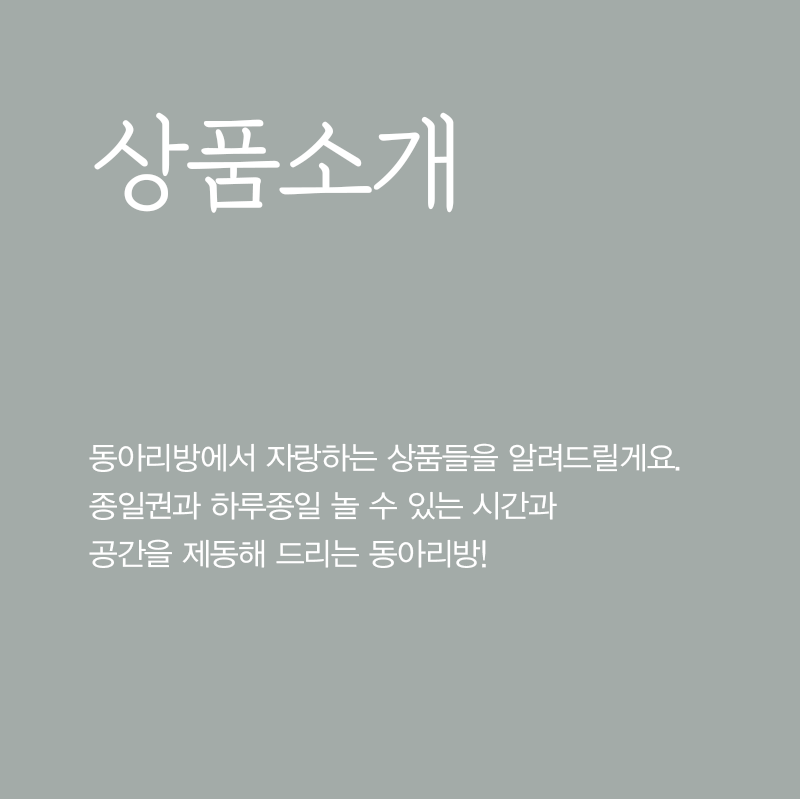
<style>
.page{position:relative;width:800px;height:800px;background:#a3aba8}
.page>*{position:absolute;margin:0}
.t1{font:103.1px "DXKPMB-KSCpc-EUC-H";letter-spacing:-0.025em;color:#ffffff}
.t2{font:31px/48px "YDVYGOStd12";letter-spacing:-0.025em;color:#ffffff}
</style>
<div class="page">
<p class="t1" style="left:94px;top:112px;width:360px;height:101px">상품소개</p>
<p class="t2" style="left:89px;top:443px;width:591px;height:125px">동아리방에서 자랑하는 상품들을 알려드릴게요.<br>종일권과 하루종일 놀 수 있는 시간과<br>공간을 제동해 드리는 동아리방!</p>
</div>
